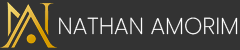
<style>
.page{position:relative;width:240px;height:50px;background:#333333}
.page>*{position:absolute;margin:0}
.t1{font:23.1px "Poppins-ExtraLight";color:#ffffff;text-transform:uppercase}
</style>
<div class="page">
<p class="t1" style="left:59px;top:17px;width:179px;height:18px">NATHAN AMORIM</p>
</div>
